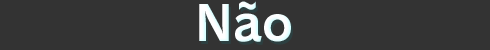
<style>
.page{position:relative;width:490px;height:50px;background:#333333}
.page>*{position:absolute;margin:0}
.t1{font:48px "RodinPro-B";color:#fffeff}
</style>
<div class="page">
<p class="t1" style="left:199px;top:1px;width:92px;height:41px">Não</p>
</div>
